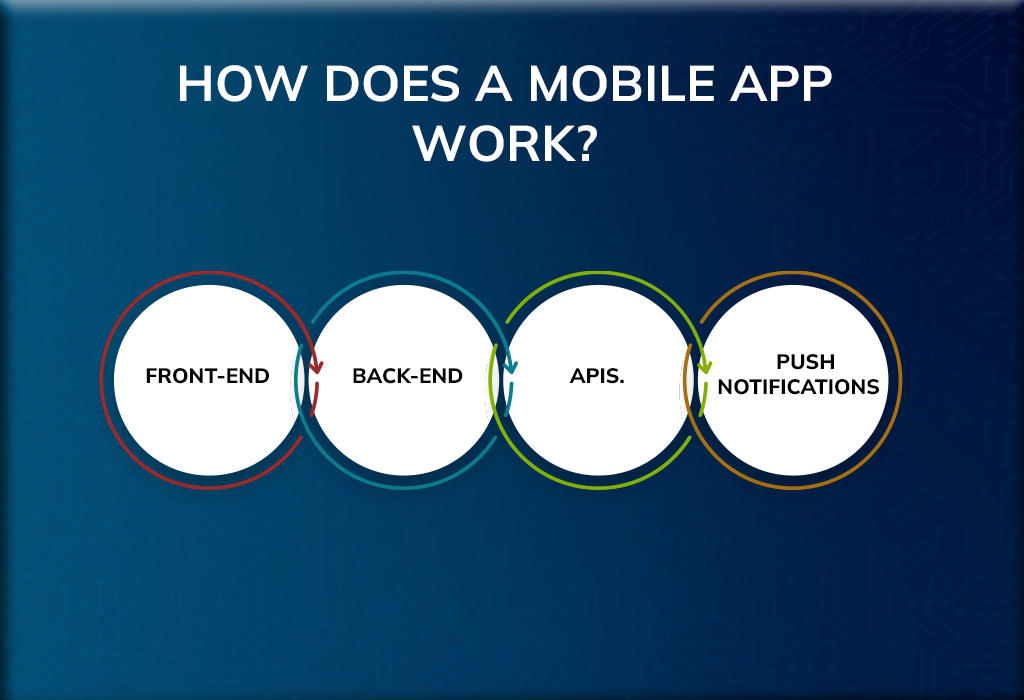
<style>
.page{position:relative;width:1024px;height:700px}
.page>*{position:absolute;margin:0}
.t1{font:50px "Mulish-Bold";color:#ffffff;text-transform:uppercase}
.t2{font:20.8px "Mulish-ExtraBold";color:#000000;text-transform:uppercase}
.t3{font:25px "Mulish-ExtraBold";color:#000000;text-transform:uppercase}
</style>
<div class="page">
<p class="t1" style="left:180px;top:65px;width:652px;height:97px;text-align:center">How Does a Mobile App Work?</p>
<p class="t2" style="left:718px;top:354px;width:161px;height:41px"><span class="t3">  </span>Push Notifications</p>
<p class="t2" style="left:146px;top:368px;width:123px;height:16px">Front-End</p>
<p class="t2" style="left:353px;top:368px;width:110px;height:16px">Back-End</p>
<p class="t2" style="left:569px;top:368px;width:55px;height:16px">APIs.</p>
</div>
